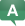
<style>
.page{position:relative;width:25px;height:26px;background:#ffffff}
.page>*{position:absolute;margin:0}
.t1{font:16px "Arial-BoldMT";letter-spacing:0.04em;color:#ffffff}
</style>
<div class="page">
<p class="t1" style="left:7px;top:4px;width:12px;height:12px">A</p>
</div>
